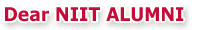
<style>
.page{position:relative;width:200px;height:30px;background:#ffffff}
.page>*{position:absolute;margin:0}
.t1{font:18.7px "Verdana-Bold";color:#c30c37;scale:0.92 1}
</style>
<div class="page">
<p class="t1" style="left:5px;top:7px;width:179px;height:15px">Dear NIIT ALUMNI</p>
</div>
